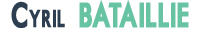
<style>
.page{position:relative;width:202px;height:30px;background:#ffffff}
.page>*{position:absolute;margin:0}
.t1{font:33.6px "MotorOil1937M54";color:#68c3a3;text-transform:uppercase;font-weight:bold;scale:0.71 1}
.t2{font:33.6px "MotorOil1937M54";color:#2c3e50;font-variant:small-caps;font-weight:bold;scale:0.71 1}
</style>
<div class="page">
<p class="t1" style="left:11px;top:0px;width:178px;height:28px"><span class="t2">Cyril  </span>Bataillie</p>
</div>
